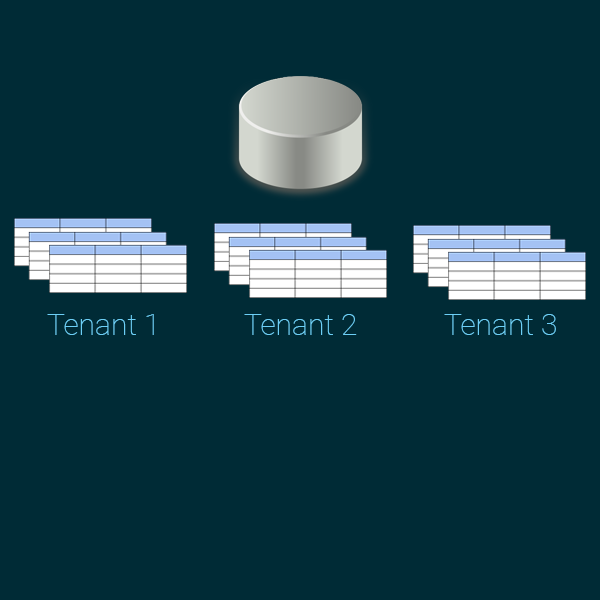
<style>
.page{position:relative;width:600px;height:600px;background:#002b36}
.page>*{position:absolute;margin:0}
.t1{font:30px "Roboto-Thin";color:#6dcff6}
</style>
<div class="page">
<p class="t1" style="left:47px;top:314px;width:107px;height:21px">Tenant 1</p>
<p class="t1" style="left:244px;top:314px;width:113px;height:21px">Tenant 2</p>
<p class="t1" style="left:444px;top:314px;width:112px;height:21px">Tenant 3</p>
</div>
